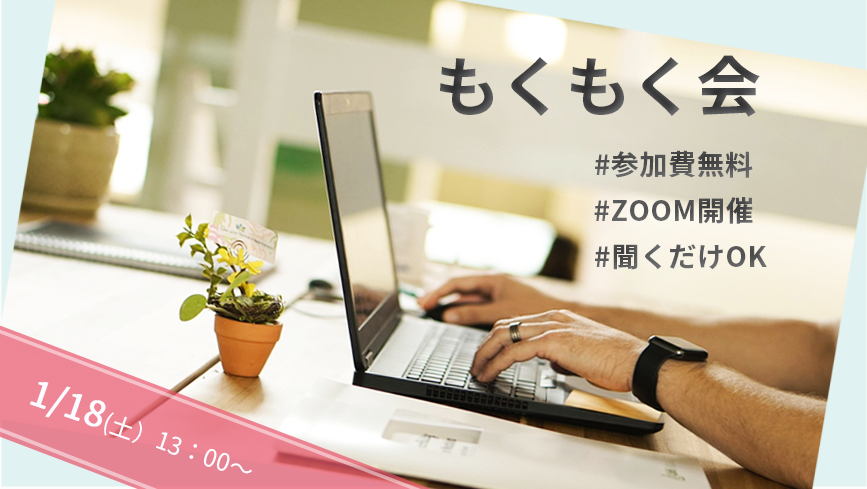
<style>
.page{position:relative;width:867px;height:489px}
.page>*{position:absolute;margin:0}
.t1{font:65px "SourceHanSans-Bold";letter-spacing:0.007em;color:#444445}
.t2{font:28px "SourceHanSans-Bold";letter-spacing:0.02em;color:#505052}
.t3{font:28px "SourceHanSans-Bold";letter-spacing:0.02em;color:#555557}
.t4{font:28px "SourceHanSans-Bold";letter-spacing:0.02em;color:#59595b}
.t5{font:24px "SourceHanSans-Regular";color:#fbfcff}
.t6{font:36px "SourceHanSans-Regular";color:#fbfcff;font-weight:bold}
.t7{font:34px "SourceHanSans-Regular";color:#fbfcff}
</style>
<div class="page">
<p class="t1" style="left:440px;top:55px;width:320px;height:62px">もくもく会</p>
<p class="t2" style="left:595px;top:150px;width:158px;height:28px">#参加費無料</p>
<p class="t3" style="left:594px;top:197px;width:159px;height:27px">#ZOOM開催</p>
<p class="t4" style="left:595px;top:244px;width:172px;height:26px">#聞くだけOK</p>
<p class="t5" style="left:30px;top:382px;width:222px;height:92px;text-align:center;rotate:19deg"><span class="t6">1/18</span>(土）13：00～<br><span class="t7">)</span></p>
</div>
